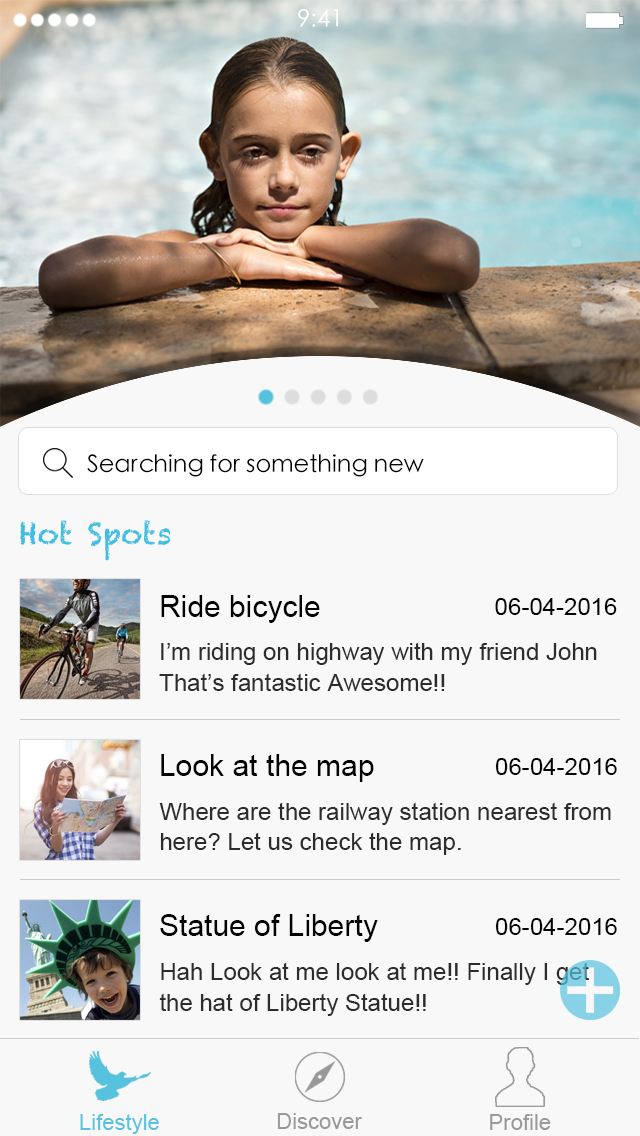
<style>
.page{position:relative;width:640px;height:1136px;background:#f8f8f8}
.page>*{position:absolute;margin:0}
.t1{font:24px "STHeiti";color:#ffffff}
.t2{font:24px "STHeiti";color:#000000}
.t3{font:30px "Chalkduster";color:#3bbee0}
.t4{font:30px "ArialMT";color:#020202}
.t5{font:24px "ArialMT";color:#020202}
.t6{font:24px/31px "ArialMT";color:#2c2c2c}
.t7{font:29.6px "ArialMT";color:#020202}
.t8{font:23.7px "ArialMT";color:#020202}
.t9{font:23.8px/30.8px "ArialMT";color:#2c2c2c}
.t10{font:22px "ArialMT";color:#57c2de}
.t11{font:22px "ArialMT";color:#999999}
</style>
<div class="page">
<p class="t1" style="left:298px;top:9px;width:40px;height:18px">9:41</p>
<p class="t2" style="left:87px;top:454px;width:337px;height:23px">Searching for something new</p>
<p class="t3" style="left:20px;top:520px;width:151px;height:41px">Hot Spots</p>
<p class="t4" style="left:161px;top:595px;width:159px;height:28px">Ride bicycle</p>
<p class="t5" style="left:495px;top:598px;width:122px;height:17px">06-04-2016</p>
<p class="t6" style="left:159px;top:642px;width:438px;height:49px">I’m riding on highway with my friend John <br>That’s fantastic Awesome!!</p>
<p class="t7" style="left:161px;top:754px;width:213px;height:28px">Look at the map</p>
<p class="t8" style="left:495px;top:758px;width:122px;height:17px">06-04-2016</p>
<p class="t9" style="left:159px;top:802px;width:452px;height:53px">Where are the railway station nearest from<br>here? Let us check the map.</p>
<p class="t7" style="left:160px;top:914px;width:218px;height:28px">Statue of Liberty</p>
<p class="t8" style="left:495px;top:918px;width:122px;height:17px">06-04-2016</p>
<p class="t9" style="left:159px;top:962px;width:430px;height:54px">Hah Look at me look at me!! Finally I get <br>the hat of Liberty Statue!!</p>
<p class="t10" style="left:80px;top:1114px;width:79px;height:20px">Lifestyle</p>
<p class="t11" style="left:277px;top:1113px;width:85px;height:16px">Discover</p>
<p class="t11" style="left:490px;top:1114px;width:61px;height:16px">Profile</p>
</div>
